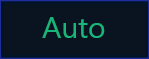
<style>
.page{position:relative;width:149px;height:59px;background:#0a1421}
.page>*{position:absolute;margin:0}
.t1{font:30px "SegoeUISymbol";color:#19b579}
</style>
<div class="page">
<p class="t1" style="left:42px;top:17px;width:63px;height:21px">Auto</p>
</div>
